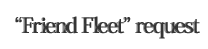
<style>
.page{position:relative;width:208px;height:49px;background:#ffffff}
.page>*{position:absolute;margin:0}
.t1{font:22px "HeiseiMinStd-W7";letter-spacing:-0.08em;color:#343434;font-weight:bold}
</style>
<div class="page">
<p class="t1" style="left:15px;top:16px;width:185px;height:23px">“Friend Fleet” request</p>
</div>
